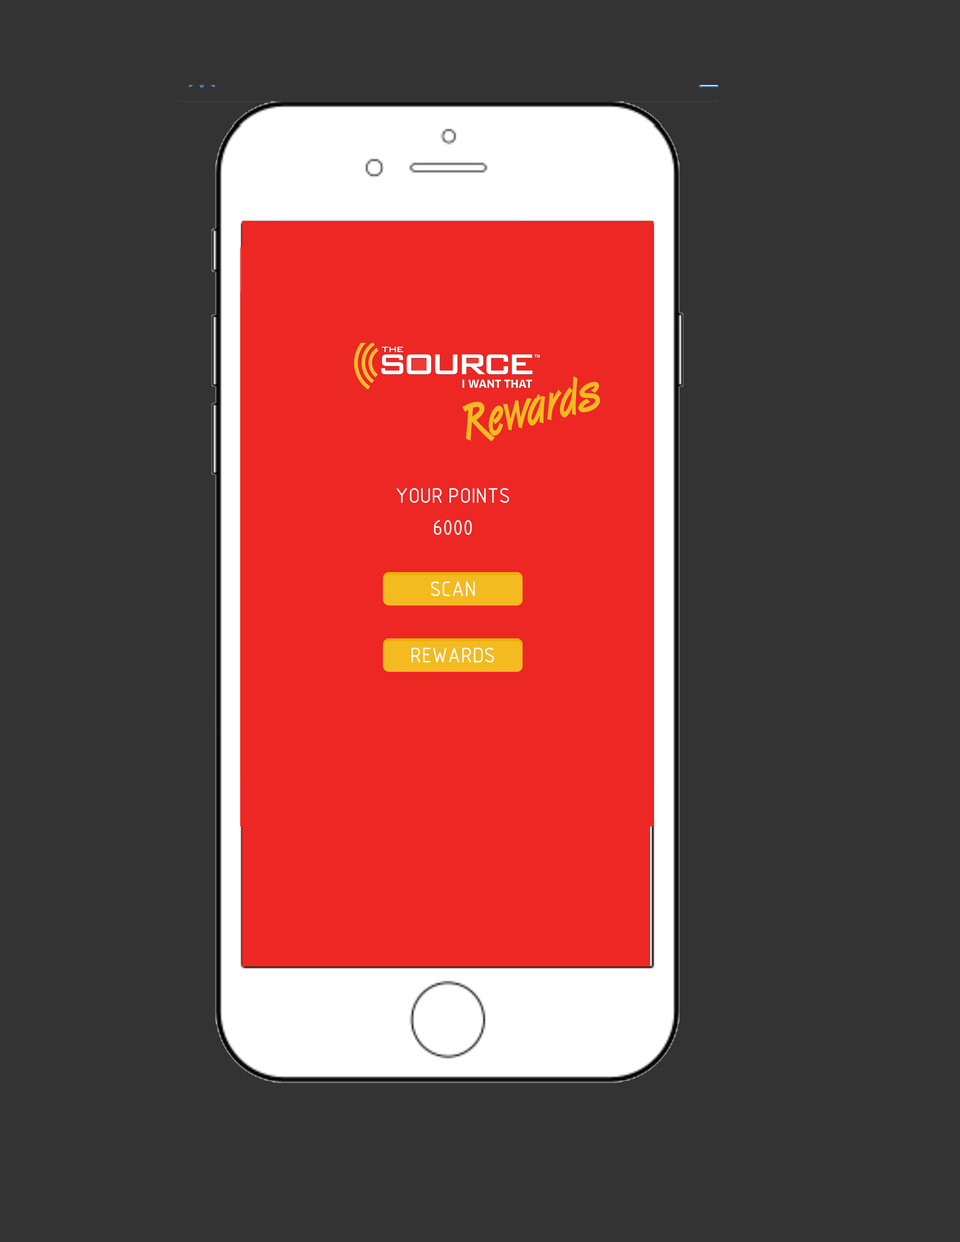
<style>
.page{position:relative;width:960px;height:1242px;background:#333333}
.page>*{position:absolute;margin:0}
.t1{font:20.2px "GOST-Common";color:#fafafa}
</style>
<div class="page">
<p class="t1" style="left:396px;top:488px;width:113px;height:15px">YOUR POINTS</p>
<p class="t1" style="left:434px;top:520px;width:38px;height:15px">6000</p>
<p class="t1" style="left:431px;top:582px;width:44px;height:14px">SCAN</p>
<p class="t1" style="left:411px;top:648px;width:83px;height:15px">REWARDS</p>
</div>
